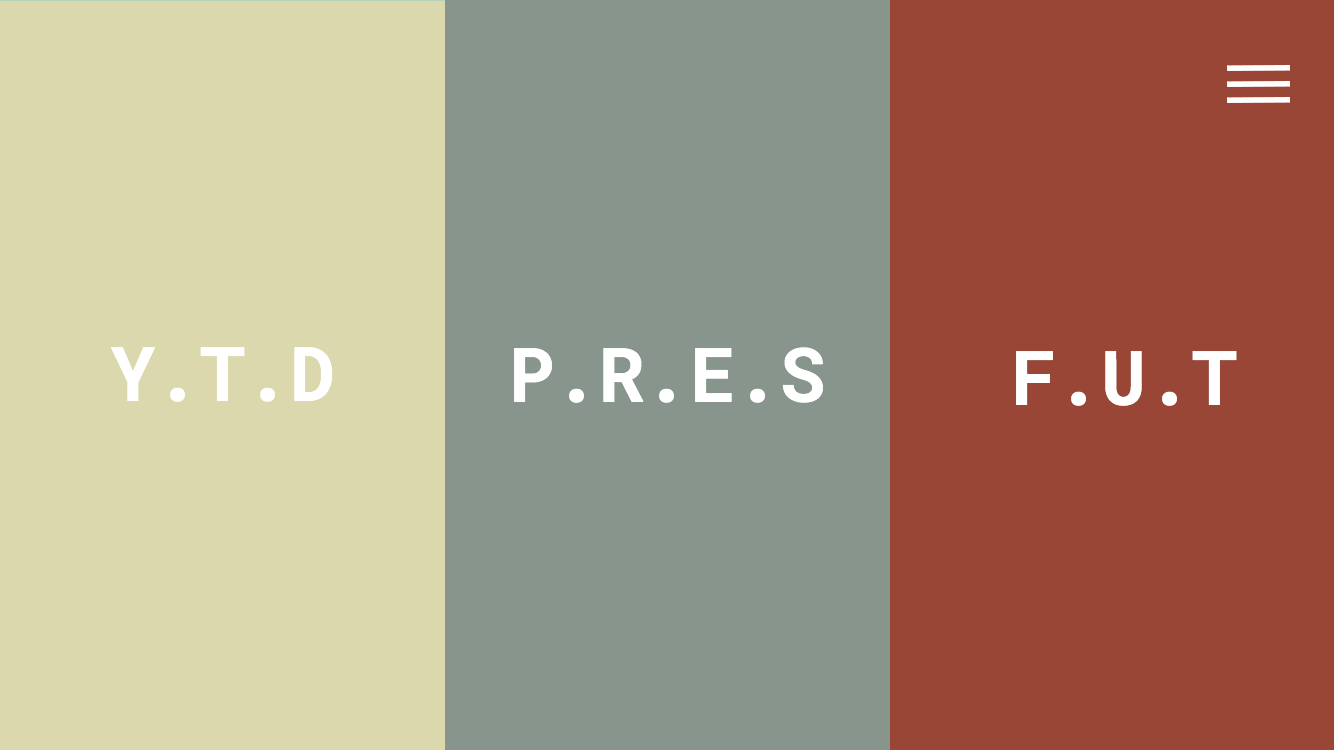
<style>
.page{position:relative;width:1334px;height:750px;background:#88958d}
.page>*{position:absolute;margin:0}
.t1{font:75px "RobotoMono-Bold";color:#ffffff}
</style>
<div class="page">
<p class="t1" style="left:111px;top:347px;width:222px;height:55px">Y.T.D</p>
<p class="t1" style="left:514px;top:347px;width:309px;height:56px">P.R.E.S</p>
<p class="t1" style="left:1016px;top:351px;width:221px;height:55px">F.U.T</p>
</div>
